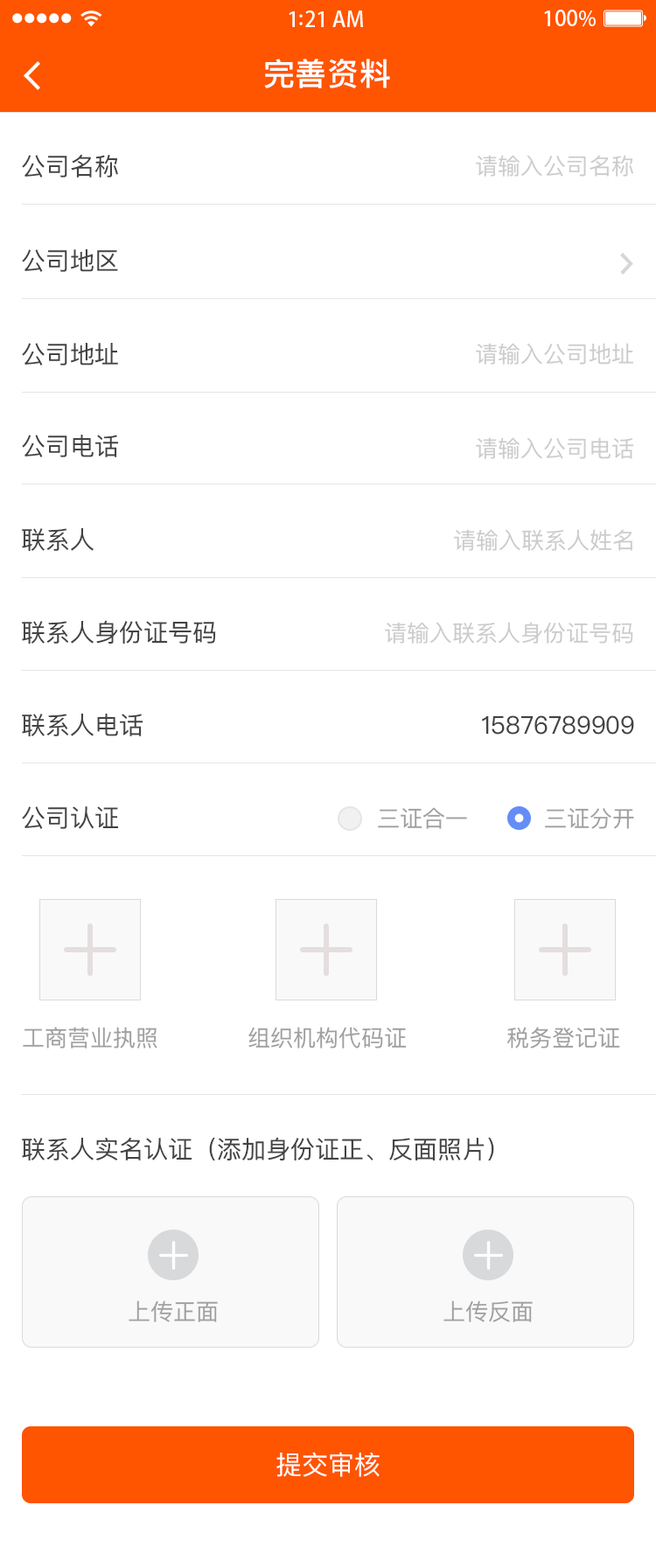
<style>
.page{position:relative;width:656px;height:1568px;background:#ffffff}
.page>*{position:absolute;margin:0}
.t1{font:31.5px "PingFangSC-Medium";letter-spacing:0.02em;color:#ffffff}
.t2{font:24.5px "PingFangSC-Regular";color:#434343}
.t3{font:22.7px "PingFangSC-Regular";color:#cccccc}
.t4{font:22.7px "PingFangSC-Regular";color:#a0a0a0}
.t5{font:26.2px "PingFangSC-Regular";color:#ffffff;text-transform:uppercase}
</style>
<div class="page">
<p class="t1" style="left:264px;top:59px;width:126px;height:29px">完善资料</p>
<p class="t2" style="left:22px;top:155px;width:96px;height:23px">公司名称</p>
<p class="t3" style="left:476px;top:155px;width:157px;height:22px">请输入公司名称</p>
<p class="t2" style="left:22px;top:249px;width:96px;height:23px">公司地区</p>
<p class="t2" style="left:22px;top:343px;width:96px;height:23px">公司地址</p>
<p class="t3" style="left:476px;top:343px;width:157px;height:22px">请输入公司地址</p>
<p class="t2" style="left:22px;top:435px;width:97px;height:22px">公司电话</p>
<p class="t3" style="left:476px;top:437px;width:158px;height:22px">请输入公司电话</p>
<p class="t2" style="left:22px;top:528px;width:72px;height:24px">联系人</p>
<p class="t3" style="left:454px;top:529px;width:178px;height:22px">请输入联系人姓名</p>
<p class="t2" style="left:22px;top:620px;width:194px;height:25px">联系人身份证号码</p>
<p class="t3" style="left:385px;top:622px;width:248px;height:22px">请输入联系人身份证号码</p>
<p class="t2" style="left:22px;top:714px;width:121px;height:23px">联系人电话</p>
<p class="t2" style="left:482px;top:715px;width:152px;height:20px">15876789909</p>
<p class="t2" style="left:22px;top:806px;width:97px;height:23px">公司认证</p>
<p class="t4" style="left:378px;top:807px;width:89px;height:22px">三证合一</p>
<p class="t4" style="left:545px;top:808px;width:89px;height:21px">三证分开</p>
<p class="t4" style="left:23px;top:1027px;width:134px;height:22px">工商营业执照</p>
<p class="t4" style="left:248px;top:1027px;width:159px;height:22px">组织机构代码证</p>
<p class="t4" style="left:507px;top:1027px;width:113px;height:22px">税务登记证</p>
<p class="t2" style="left:22px;top:1137px;width:472px;height:24px">联系人实名认证（添加身份证正、反面照片）</p>
<p class="t4" style="left:129px;top:1300px;width:89px;height:22px">上传正面</p>
<p class="t4" style="left:443px;top:1300px;width:90px;height:22px">上传反面</p>
<p class="t5" style="left:276px;top:1452px;width:104px;height:25px">提交审核</p>
</div>
